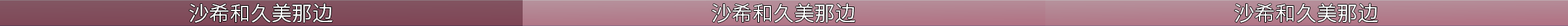
<style>
.page{position:relative;width:1568px;height:26px}
.page>*{position:absolute;margin:0}
.t1{font:20.6px "SourceHanSansSC-Normal";color:#ffffff}
</style>
<div class="page">
<p class="t1" style="left:189px;top:3px;width:144px;height:20px">沙希和久美那边</p>
<p class="t1" style="left:711px;top:3px;width:144px;height:20px">沙希和久美那边</p>
<p class="t1" style="left:1234px;top:3px;width:144px;height:20px">沙希和久美那边</p>
</div>
